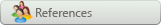
<style>
.page{position:relative;width:161px;height:25px}
.page>*{position:absolute;margin:0}
.t1{font:12px "SegoeUI";color:#706d6d}
</style>
<div class="page">
<p class="t1" style="left:36px;top:8px;width:56px;height:9px">References</p>
</div>
